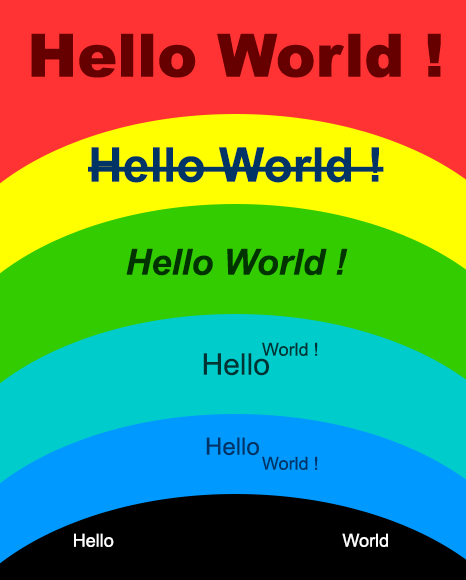
<style>
.page{position:relative;width:466px;height:580px}
.page>*{position:absolute;margin:0}
.t1{font:60px "Arial-Black";color:#660000}
.t2{font:48px "Arial-BoldMT";color:#003366}
.t3{font:36px "Arial-BoldItalicMT";color:#003300}
.t4{font:18px "ArialMT";color:#003333}
.t5{font:30px "ArialMT";color:#003333}
.t6{font:24px "ArialMT";color:#003366}
.t7{font:18px "ArialMT";color:#003366}
.t8{font:18px "ArialMT";color:#ffffff}
</style>
<div class="page">
<p class="t1" style="left:31px;top:33px;width:410px;height:45px">Hello World !</p>
<p class="t2" style="left:88px;top:147px;width:296px;height:36px">Hello World !</p>
<p class="t3" style="left:126px;top:248px;width:222px;height:28px">Hello World !</p>
<p class="t4" style="left:262px;top:342px;width:56px;height:14px">World !</p>
<p class="t5" style="left:203px;top:353px;width:66px;height:23px">Hello</p>
<p class="t6" style="left:206px;top:437px;width:53px;height:19px">Hello</p>
<p class="t7" style="left:262px;top:456px;width:56px;height:14px">World !</p>
<p class="t8" style="left:74px;top:533px;width:40px;height:14px">Hello</p>
<p class="t8" style="left:342px;top:533px;width:46px;height:14px">World</p>
</div>
